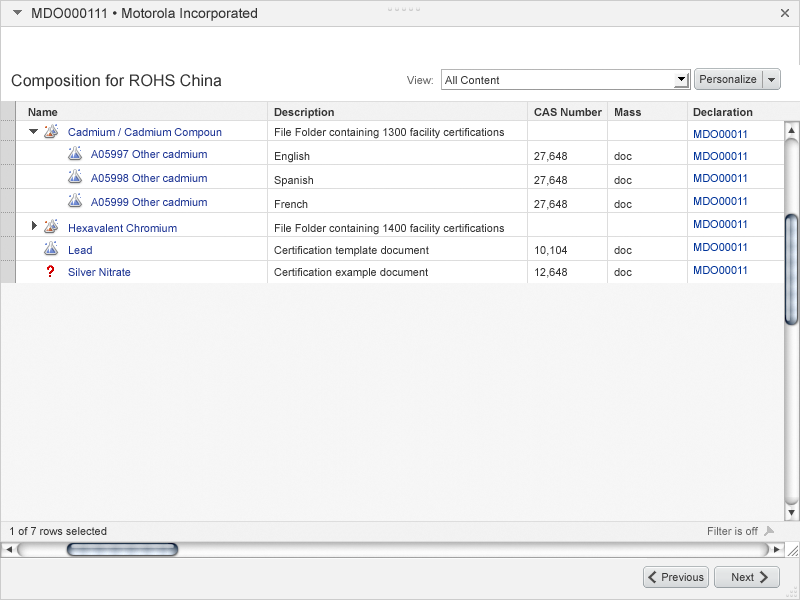
<style>
.page{position:relative;width:800px;height:600px;background:#ffffff}
.page>*{position:absolute;margin:0}
.t1{font:14px "ArialMT";color:#333333}
.t2{font:16px "ArialMT";letter-spacing:0.005em;color:#333333}
.t3{font:11px "ArialMT";letter-spacing:0.005em;color:#666666}
.t4{font:11px "ArialMT";letter-spacing:0.005em;color:#333333}
.t5{font:11px "ArialMT";color:#333333}
.t6{font:11px "Arial-BoldMT";color:#333333}
.t7{font:11px/24px "ArialMT";color:#333333}
.t8{font:11px/20px "Arial-BoldMT";color:#333333}
.t9{font:11px/20px "ArialMT";color:#333333}
.t10{font:11px/22px "ArialMT";color:#333333}
.t11{font:11px/23px "ArialMT";color:#003399}
.t12{font:11px/22px "ArialMT";color:#003399}
.t13{font:11px/20px "ArialMT";color:#1f3695}
.t14{font:11px/24px "ArialMT";color:#1f3695}
.t15{font:11px/22px "ArialMT";color:#1f3695}
.t16{font:11px "ArialMT";color:#666666}
</style>
<div class="page">
<p class="t1" style="left:32px;top:7px;width:225px;height:14px">MDO000111 • Motorola Incorporated</p>
<p class="t2" style="left:11px;top:74px;width:211px;height:16px">Composition for ROHS China</p>
<p class="t3" style="left:407px;top:76px;width:26px;height:8px">View:</p>
<p class="t4" style="left:445px;top:76px;width:55px;height:8px">All Content</p>
<p class="t5" style="left:700px;top:75px;width:57px;height:8px">Personalize</p>
<p class="t6" style="left:28px;top:108px;width:30px;height:8px">Name</p>
<p class="t7" style="left:274px;top:108px;width:230px;height:171px"><span class="t8">Description<br></span><span class="t9">File Folder containing 1300 facility certifications<br></span>English <br>Spanish<br>French<br>File Folder containing 1400 facility certifications<br><span class="t10">Certification template document<br>Certification example document</span></p>
<p class="t7" style="left:534px;top:108px;width:68px;height:170px"><span class="t8">CAS Number<br><br></span>27,648 <br>27,648<br>27,648<br><br><span class="t10">10,104<br>12,648</span></p>
<p class="t7" style="left:614px;top:108px;width:27px;height:168px"><span class="t8">Mass<br><br></span>doc <br>doc<br>doc<br><br><span class="t10">doc<br>doc</span></p>
<p class="t11" style="left:693px;top:108px;width:60px;height:166px"><span class="t8">Declaration<br></span><span class="t12">MDO00011<br>MDO00011<br>MDO00011<br></span>MDO00011<br>MDO00011<br>MDO00011<br>MDO00011</p>
<p class="t13" style="left:68px;top:128px;width:154px;height:148px"><span class="t8"><br></span>Cadmium / Cadmium Compoun<br><br><br><br><span class="t14">Hexavalent Chromium<br></span><span class="t15">Lead <br>Silver Nitrate</span></p>
<p class="t14" style="left:91px;top:150px;width:116px;height:56px"><span class="t13">A05997 Other cadmium<br></span>A05998 Other cadmium<br>A05999 Other cadmium</p>
<p class="t5" style="left:10px;top:527px;width:97px;height:8px">1 of 7 rows selected</p>
<p class="t16" style="left:708px;top:527px;width:50px;height:8px">Filter is off</p>
<p class="t5" style="left:662px;top:573px;width:42px;height:8px">Previous</p>
<p class="t5" style="left:732px;top:573px;width:22px;height:8px">Next</p>
</div>
